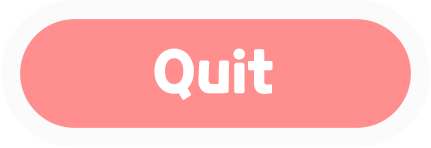
<style>
.page{position:relative;width:431px;height:148px;background:#ff8f8f}
.page>*{position:absolute;margin:0}
.t1{font:60px "CookieRun-Bold";letter-spacing:-0.025em;color:#ffffff}
</style>
<div class="page">
<p class="t1" style="left:154px;top:48px;width:119px;height:52px">Quit</p>
</div>
